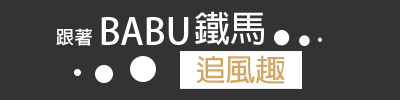
<style>
.page{position:relative;width:400px;height:100px;background:#333333}
.page>*{position:absolute;margin:0}
.t1{font:36px "AdobeFanHeitiStd-Bold";color:#ffffff}
.t2{font:18px "AdobeFanHeitiStd-Bold";color:#ffffff}
.t3{font:30px "AdobeFanHeitiStd-Bold";color:#d4a75f}
</style>
<div class="page">
<p class="t1" style="left:101px;top:17px;width:88px;height:28px">BABU</p>
<p class="t1" style="left:195px;top:11px;width:69px;height:34px">鐵馬</p>
<p class="t2" style="left:56px;top:28px;width:36px;height:18px">跟著</p>
<p class="t3" style="left:196px;top:55px;width:89px;height:29px">追風趣</p>
</div>
